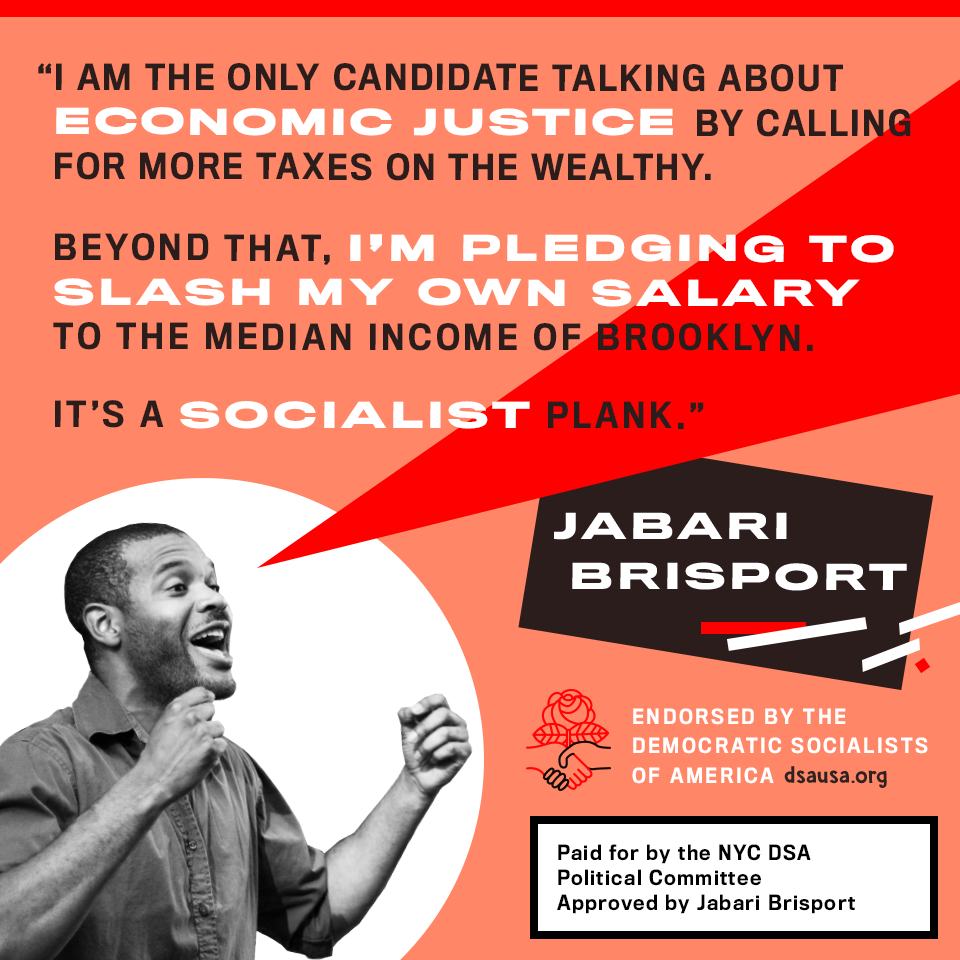
<style>
.page{position:relative;width:960px;height:960px;background:#ff8767}
.page>*{position:absolute;margin:0}
.t1{font:33.6px/44.7px "TitlingGothicFBNarrow-Medium";letter-spacing:0.07em;color:#2c1d1d;text-transform:uppercase}
.t2{font:33.6px/44.7px "TitlingGothicFBExtended-Bold";letter-spacing:0.07em;color:#ffffff;text-transform:uppercase}
.t3{font:33.6px/41.7px "TitlingGothicFBNarrow-Medium";letter-spacing:0.07em;color:#2c1d1d;text-transform:uppercase}
.t4{font:33.6px/30.7px "TitlingGothicFBNarrow-Medium";letter-spacing:0.11em;color:#2c1d1d;text-transform:uppercase}
.t5{font:33.6px/30.7px "TitlingGothicFBExtended-Bold";letter-spacing:0.11em;color:#ffffff;text-transform:uppercase}
.t6{font:33.6px/44.5px "TitlingGothicFBExtended-Bold";letter-spacing:0.11em;color:#ffffff;text-transform:uppercase}
.t7{font:33.6px/44.5px "TitlingGothicFBNarrow-Medium";letter-spacing:0.11em;color:#2c1d1d;text-transform:uppercase}
.t8{font:33.6px/27.7px "TitlingGothicFBNarrow-Medium";letter-spacing:0.11em;color:#2c1d1d;text-transform:uppercase}
.t9{font:33.6px/27.7px "TitlingGothicFBExtended-Bold";letter-spacing:0.11em;color:#ffffff;text-transform:uppercase}
.t10{font:33.6px/27.7px "TitlingGothicFBNarrow-Medium";letter-spacing:0.09em;color:#2c1d1d;text-transform:uppercase}
.t11{font:33.6px/50.5px "TitlingGothicFBExtended-Bold";letter-spacing:0.11em;color:#ffffff;text-transform:uppercase}
.t12{font:19.5px/29.4px "TitlingGothicFBNarrow-Medium";letter-spacing:0.13em;color:#ffffff}
.t13{font:24.5px "DKWhaleSong-Regular";letter-spacing:0.025em;color:#2e2e2e}
.t14{font:19.5px/24.9px "TitlingGothicFBNarrow-Medium";letter-spacing:0.07em;color:#000000}
</style>
<div class="page">
<p class="t1" style="left:38px;top:63px;width:873px;height:366px">“I AM THE ONLY CANDIDATE tALKING ABOUT<br><span class="t2">ECONOMIC JUSTICE </span>BY CALLING<br><span class="t3">FOR MORE TAXES ON THE WEALTHY. <br><br></span><span class="t4">BEYOND THAT, </span><span class="t5">I’M Pledging to<br></span><span class="t6">SLASH MY OWN SALARY <br></span><span class="t7">TO THE MEDIAN INCOME OF BRoOKlyn.<br><br></span><span class="t8">It’s A </span><span class="t9">SOCIALIST</span><span class="t8"> PLANK</span><span class="t10">.”</span></p>
<p class="t11" style="left:554px;top:512px;width:353px;height:79px">JABARI<br>BRISPORT</p>
<p class="t12" style="left:632px;top:708px;width:296px;height:76px">ENDORSED BY THE<br>DEMOCRATIC SOCIALISTS<br>OF AMERICA</p>
<p class="t13" style="left:784px;top:766px;width:103px;height:22px">dsausa.org</p>
<p class="t14" style="left:557px;top:844px;width:298px;height:70px">Paid for by the NYC DSA<br>Political Committee <br>Approved by Jabari Brisport</p>
</div>
